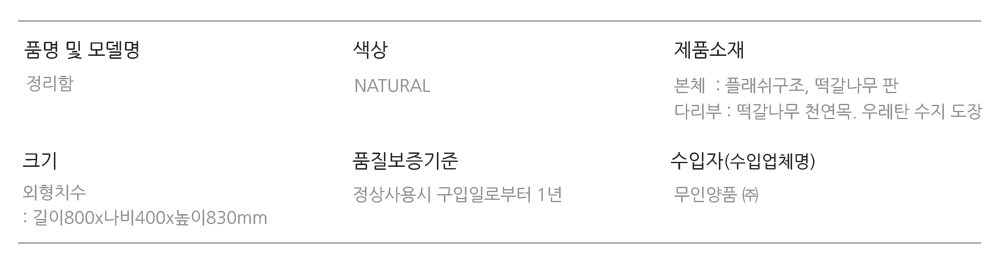
<style>
.page{position:relative;width:1000px;height:264px;background:#ffffff}
.page>*{position:absolute;margin:0}
.t1{font:18.9px "NanumGothic";color:#222222}
.t2{font:17px "NanumGothic";color:#8e8e8e}
.t3{font:17px/26px "NanumGothic";color:#8e8e8e}
.t4{font:17px/24.6px "NanumGothic";color:#8e8e8e}
.t5{font:17.2px "NanumGothic";color:#222222}
</style>
<div class="page">
<p class="t1" style="left:24px;top:41px;width:115px;height:19px">품명 및 모델명</p>
<p class="t1" style="left:353px;top:41px;width:35px;height:18px">색상</p>
<p class="t1" style="left:674px;top:41px;width:69px;height:18px">제품소재</p>
<p class="t2" style="left:27px;top:75px;width:47px;height:17px">정리함</p>
<p class="t2" style="left:355px;top:78px;width:76px;height:15px">NATURAL</p>
<p class="t3" style="left:674px;top:77px;width:309px;height:43px"><span class="t4">본체  : 플래쉬구조, 떡갈나무 판  <br></span>다리부 : 떡갈나무 천연목. 우레탄 수지 도장</p>
<p class="t1" style="left:22px;top:152px;width:34px;height:18px">크기</p>
<p class="t1" style="left:352px;top:152px;width:106px;height:18px">품질보증기준</p>
<p class="t5" style="left:670px;top:152px;width:145px;height:19px"><span class="t1">수입자</span>(수입업체명)</p>
<p class="t4" style="left:23px;top:184px;width:244px;height:42px">외형치수 <br>: 길이800x나비400x높이830mm</p>
<p class="t2" style="left:353px;top:186px;width:209px;height:17px">정상사용시 구입일로부터 1년</p>
<p class="t2" style="left:674px;top:186px;width:84px;height:17px">무인양품 ㈜</p>
</div>
